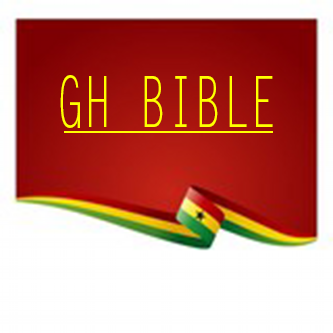
<style>
.page{position:relative;width:333px;height:333px}
.page>*{position:absolute;margin:0}
.t1{font:71.4px "LetterGothicStd";color:#ffff00;scale:0.64 1}
</style>
<div class="page">
<p class="t1" style="left:60px;top:75px;width:213px;height:53px">GH BIBLE</p>
</div>
